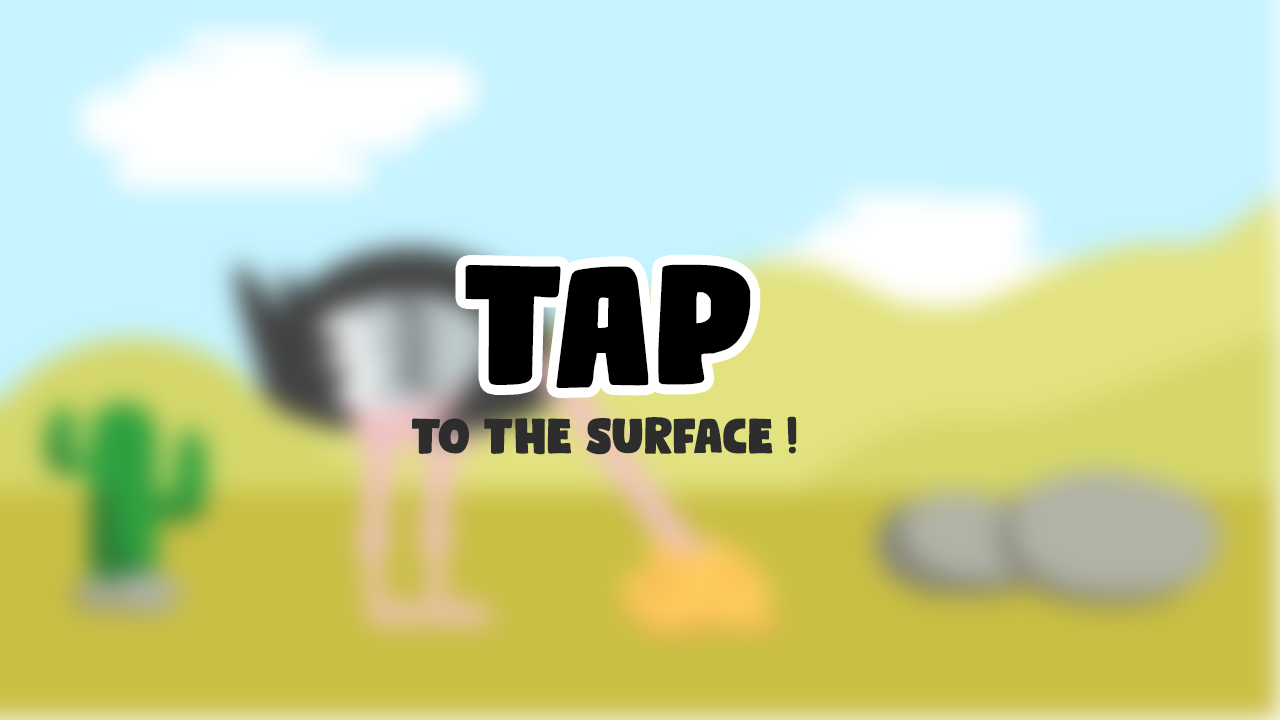
<style>
.page{position:relative;width:1280px;height:720px;background:#c5f3ff}
.page>*{position:absolute;margin:0}
.t1{font:170.9px "BumperStickerDEMO-Regular";color:#000000}
.t2{font:50px "BumperStickerDEMO-Regular";color:#2d2d2d}
</style>
<div class="page">
<p class="t1" style="left:465px;top:264px;width:286px;height:124px">TAP</p>
<p class="t2" style="left:412px;top:416px;width:385px;height:39px">To The surface !</p>
</div>
